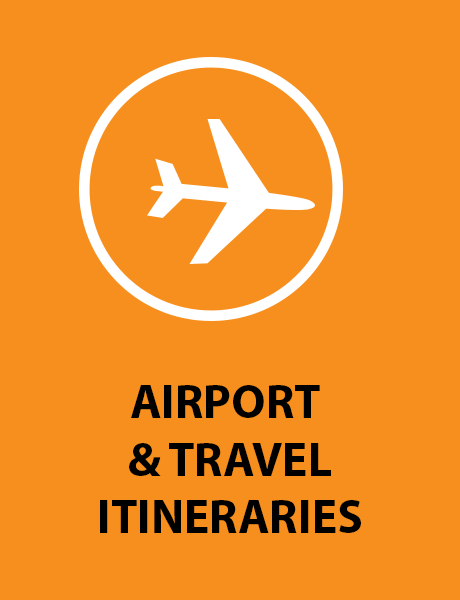
<style>
.page{position:relative;width:460px;height:600px;background:#f78f1e}
.page>*{position:absolute;margin:0}
.t1{font:47.9px "MyriadPro-Bold";color:#000000}
</style>
<div class="page">
<p class="t1" style="left:100px;top:385px;width:261px;height:148px;text-align:center">AIRPORT <br>&amp; TRAVEL<br>ITINERARIES</p>
</div>
